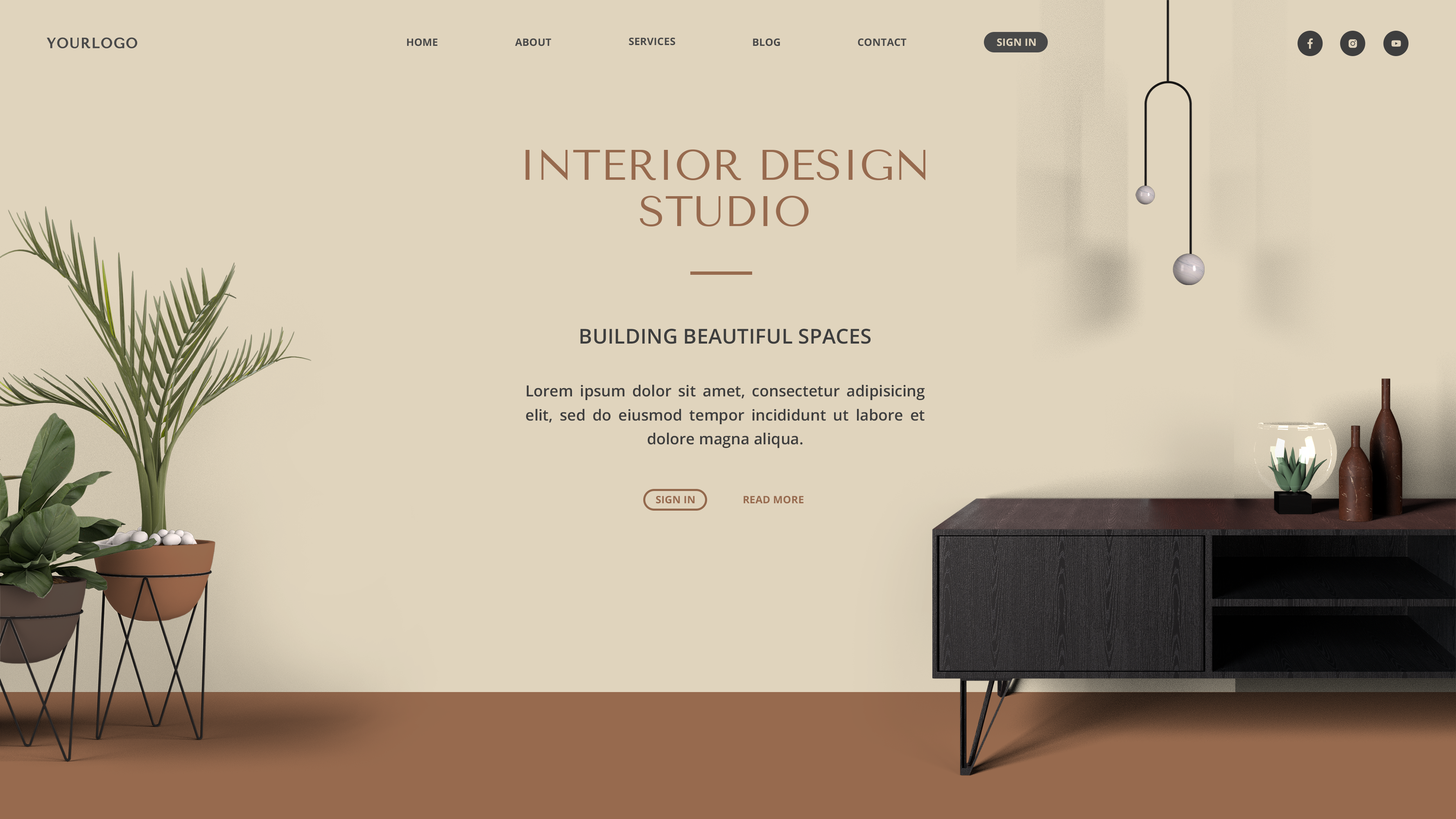
<style>
.page{position:relative;width:1456px;height:819px;background:#e0d4bd}
.page>*{position:absolute;margin:0}
.t1{font:10.2px "OpenSans-Bold";letter-spacing:0.01em;color:#494949}
.t2{font:10.2px "OpenSans-Bold";letter-spacing:0.01em;color:#e0d4bd}
.t3{font:42.7px/46.3px "TenorSans";color:#976a4e;text-transform:uppercase}
.t4{font:20.5px "OpenSans-SemiBold";letter-spacing:0.005em;color:#3e3e3e;text-transform:uppercase}
.t5{font:15.4px/23.9px "OpenSans-SemiBold";color:#3e3e3e}
.t6{font:10.2px "OpenSans-Bold";letter-spacing:0.01em;color:#976a4e}
</style>
<div class="page">
<p class="t1" style="left:407px;top:38px;width:31px;height:8px">HOME</p>
<p class="t1" style="left:515px;top:38px;width:36px;height:8px">ABOUT</p>
<p class="t1" style="left:629px;top:38px;width:46px;height:7px">SERVICES</p>
<p class="t1" style="left:753px;top:38px;width:27px;height:8px">BLOG</p>
<p class="t1" style="left:858px;top:38px;width:49px;height:8px">CONTACT</p>
<p class="t2" style="left:997px;top:38px;width:39px;height:8px">SIGN IN</p>
<p class="t3" style="left:525px;top:149px;width:400px;height:77px;text-align:center">Interior Design<br>Studio</p>
<p class="t4" style="left:580px;top:328px;width:291px;height:16px">BUILDING BEAUTiful SPACES</p>
<p class="t5" style="left:526px;top:384px;width:399px;height:64px;text-align:justify">Lorem ipsum dolor sit amet, consectetur adipisicing elit, sed do eiusmod tempor incididunt ut labore et dolore magna aliqua.</p>
<p class="t6" style="left:656px;top:496px;width:39px;height:8px">SIGN IN</p>
<p class="t6" style="left:744px;top:495px;width:60px;height:9px">READ MORE</p>
</div>
